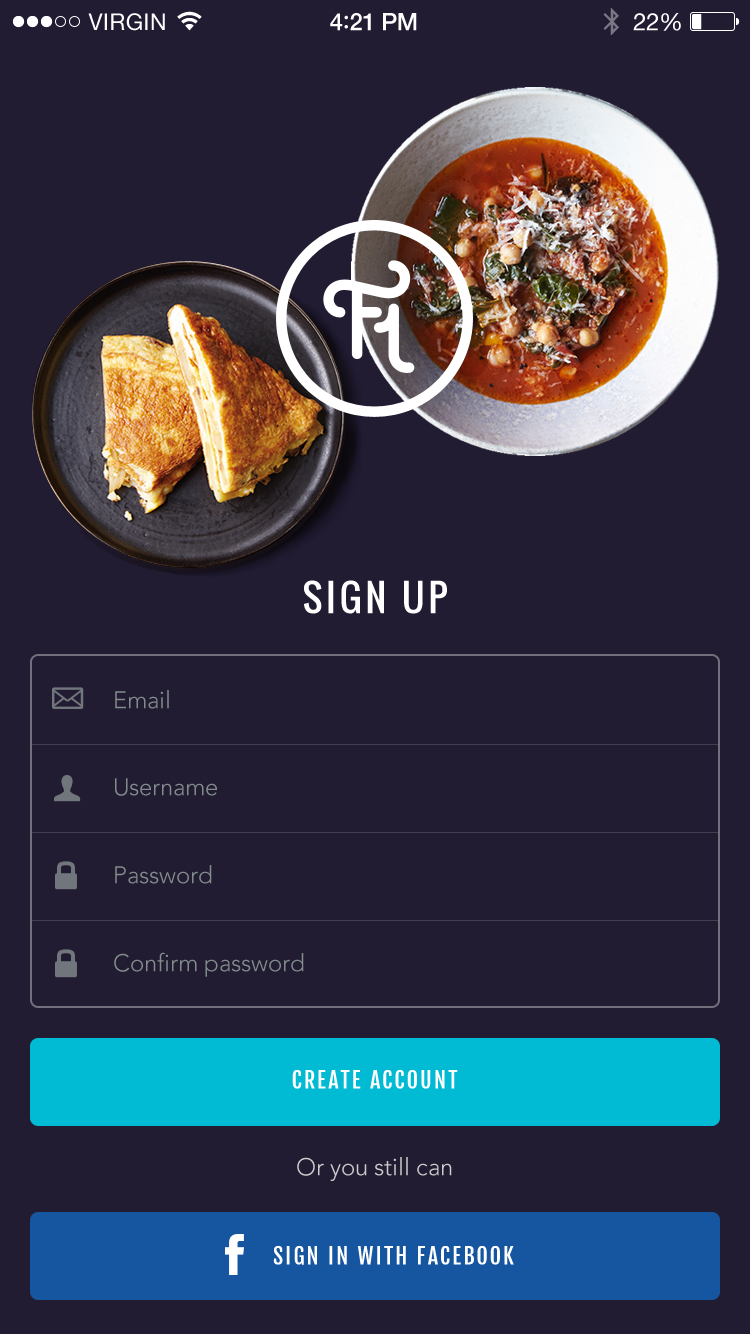
<style>
.page{position:relative;width:750px;height:1334px;background:#211c32}
.page>*{position:absolute;margin:0}
.t1{font:37px "Oswald-Regular";letter-spacing:0.1em;color:#ffffff}
.t2{font:24px "Avenir-Light";color:#838c8c}
.t3{font:22px "FjallaOne-Regular";letter-spacing:0.1em;color:#ffffff}
.t4{font:24px "Avenir-Light";color:#cccccc}
</style>
<div class="page">
<p class="t1" style="left:304px;top:580px;width:143px;height:34px">SIGN UP</p>
<p class="t2" style="left:115px;top:690px;width:54px;height:19px">Email</p>
<p class="t2" style="left:115px;top:778px;width:102px;height:18px">Username</p>
<p class="t2" style="left:115px;top:865px;width:97px;height:19px">Password</p>
<p class="t2" style="left:114px;top:952px;width:190px;height:25px">Confirm password</p>
<p class="t3" style="left:292px;top:1069px;width:166px;height:20px">CREATE ACCOUNT</p>
<p class="t4" style="left:297px;top:1157px;width:155px;height:24px">Or you still can</p>
<p class="t3" style="left:273px;top:1245px;width:241px;height:20px">SIGN IN WITH FACEBOOK</p>
</div>
